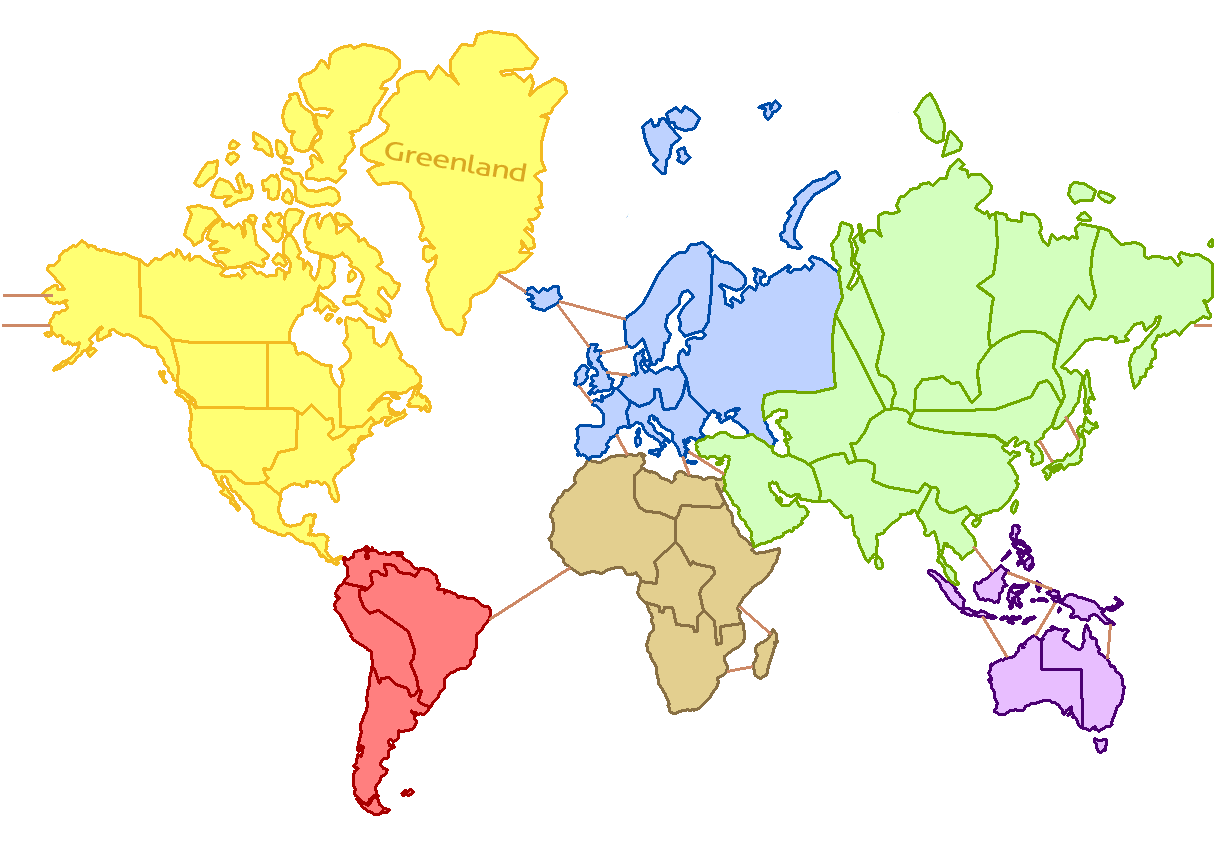
<style>
.page{position:relative;width:1215px;height:858px;background:#ffffff}
.page>*{position:absolute;margin:0}
.t1{font:24.9px "Aller";letter-spacing:-0.04em;color:#daa822;scale:1.34 1}
</style>
<div class="page">
<p class="t1" style="left:385px;top:142px;width:142px;height:40px">Greenland</p>
</div>
